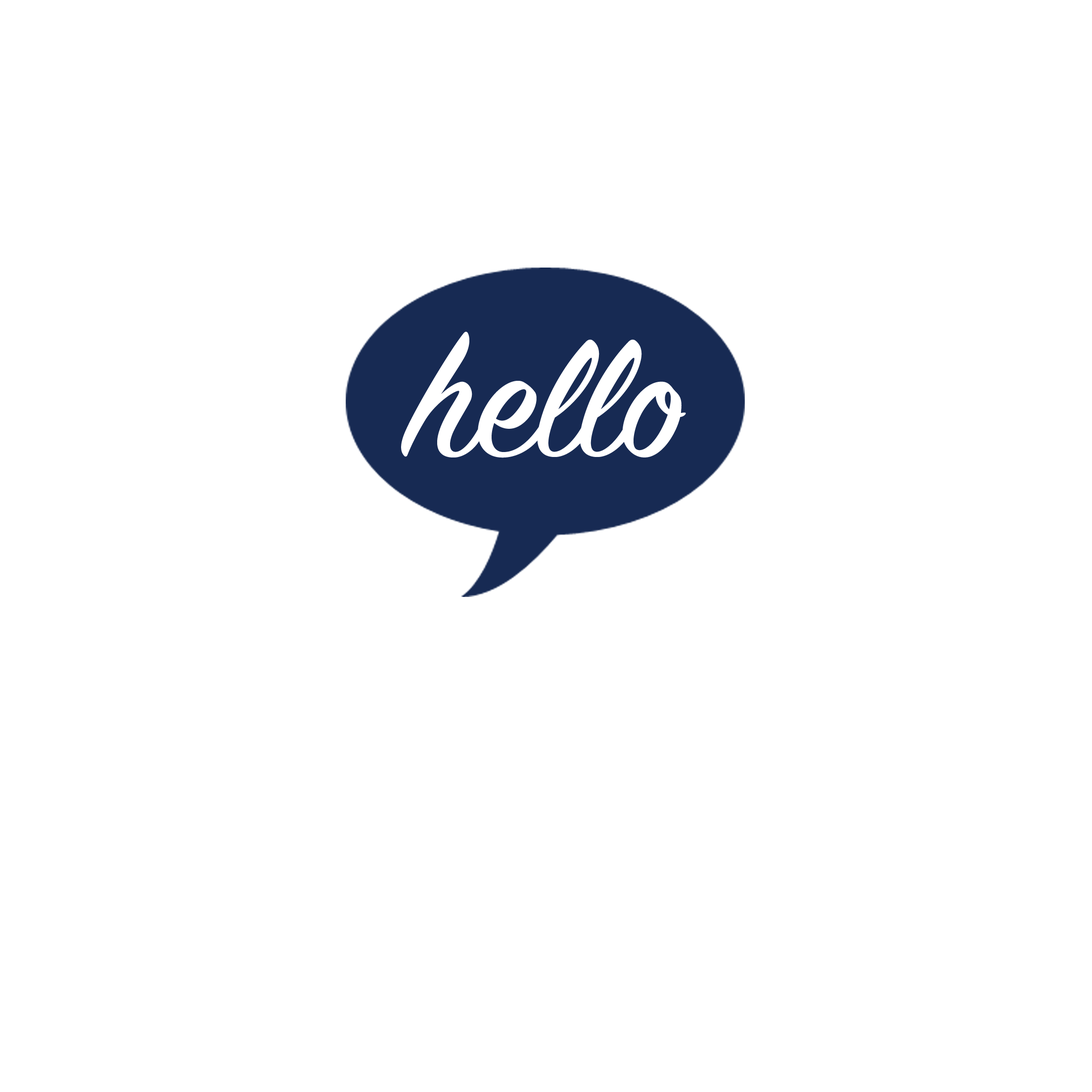
<style>
.page{position:relative;width:1092px;height:1092px;background:#ffffff}
.page>*{position:absolute;margin:0}
.t1{font:185.5px "SignPainter-HouseScript";color:#ffffff}
</style>
<div class="page">
<p class="t1" style="left:401px;top:331px;width:285px;height:127px">hello</p>
</div>
